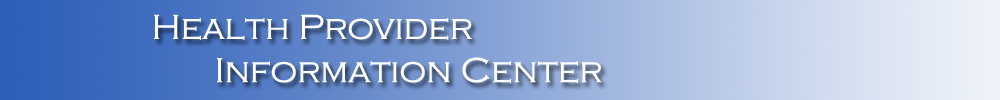
<style>
.page{position:relative;width:1000px;height:100px}
.page>*{position:absolute;margin:0}
.t1{font:36px "CopperplateGothic-Light";color:#ffffff}
</style>
<div class="page">
<p class="t1" style="left:154px;top:14px;width:448px;height:70px">Health Provider<br>       Information Center</p>
</div>
